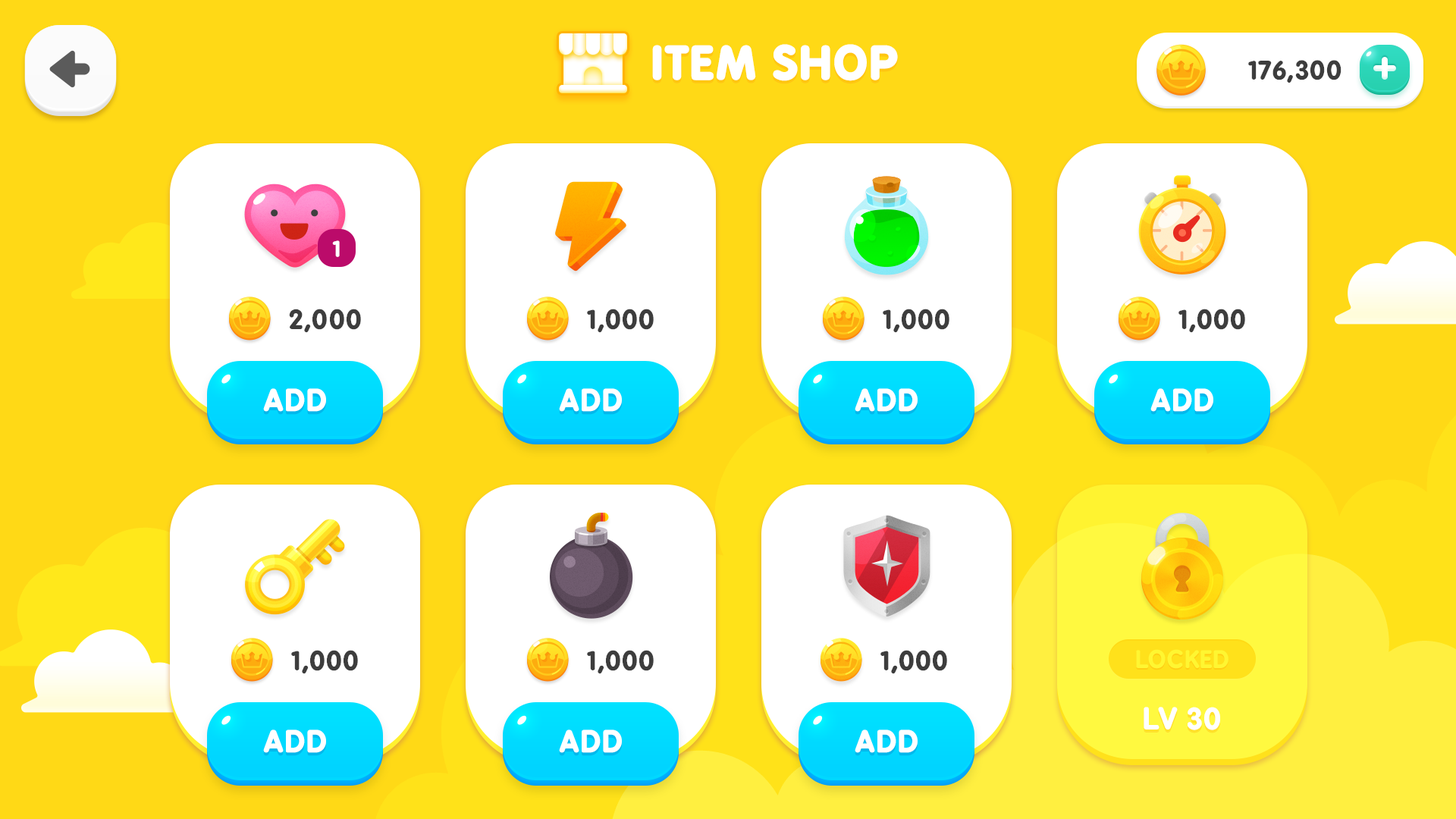
<style>
.page{position:relative;width:1456px;height:819px;background:#ffd916}
.page>*{position:absolute;margin:0}
.t1{font:43.1px "BPreplay-Bold";color:#ffffff;text-transform:uppercase;font-weight:bold;scale:1.05 1}
.t2{font:25.2px "BPreplay-Bold";color:#3d3d3d;scale:1.05 1}
.t3{font:21.6px "BPreplay-Bold";letter-spacing:-0.1em;color:#ffffff;scale:1.06 1}
.t4{font:25.9px "BPreplay-Bold";color:#3d3d3d;scale:1.05 1}
.t5{font:28.8px "BPreplay-Bold";color:#ffffff;text-transform:uppercase;font-weight:bold;scale:1.05 1}
.t6{font:23.1px "BPreplay-Bold";color:#fff631;text-transform:uppercase;scale:1.05 1}
.t7{font:28.8px "BPreplay-Bold";color:#ffffff;scale:1.05 1}
</style>
<div class="page">
<p class="t1" style="left:652px;top:44px;width:246px;height:37px">item shop</p>
<p class="t2" style="left:1248px;top:60px;width:93px;height:23px">176,300</p>
<p class="t3" style="left:332px;top:240px;width:8px;height:17px">1</p>
<p class="t4" style="left:289px;top:309px;width:72px;height:24px">2,000</p>
<p class="t4" style="left:587px;top:309px;width:67px;height:24px">1,000</p>
<p class="t4" style="left:883px;top:309px;width:66px;height:24px">1,000</p>
<p class="t4" style="left:1178px;top:309px;width:67px;height:24px">1,000</p>
<p class="t5" style="left:263px;top:388px;width:63px;height:24px">ADD</p>
<p class="t5" style="left:559px;top:388px;width:63px;height:24px">ADD</p>
<p class="t5" style="left:855px;top:388px;width:63px;height:24px">ADD</p>
<p class="t5" style="left:1150px;top:388px;width:63px;height:24px">ADD</p>
<p class="t4" style="left:291px;top:650px;width:67px;height:24px">1,000</p>
<p class="t4" style="left:587px;top:650px;width:67px;height:24px">1,000</p>
<p class="t4" style="left:880px;top:650px;width:67px;height:24px">1,000</p>
<p class="t6" style="left:1136px;top:649px;width:92px;height:20px">Locked</p>
<p class="t7" style="left:1144px;top:707px;width:76px;height:23px">LV 30</p>
<p class="t5" style="left:263px;top:730px;width:63px;height:23px">ADD</p>
<p class="t5" style="left:559px;top:730px;width:63px;height:23px">ADD</p>
<p class="t5" style="left:855px;top:730px;width:63px;height:23px">ADD</p>
</div>
